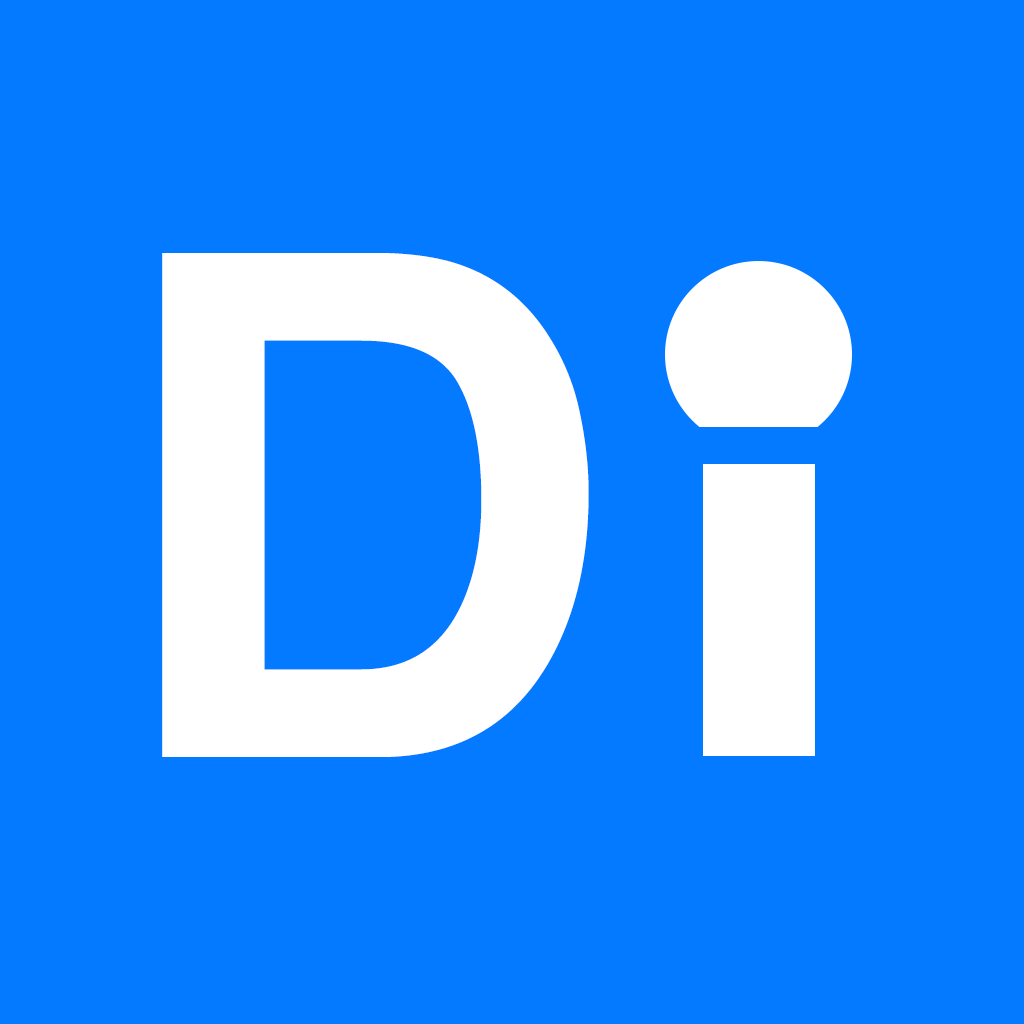
<style>
.page{position:relative;width:1024px;height:1024px;background:#037aff}
.page>*{position:absolute;margin:0}
.t1{font:700px "Helvetica-Bold";color:#ffffff}
</style>
<div class="page">
<p class="t1" style="left:162px;top:253px;width:427px;height:504px">D</p>
</div>
